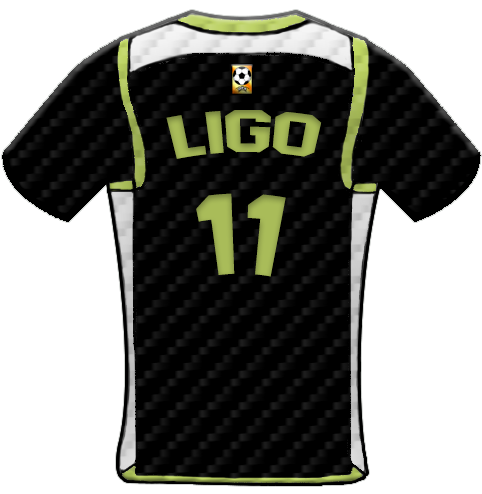
<style>
.page{position:relative;width:482px;height:494px;background:#ffffff}
.page>*{position:absolute;margin:0}
.t1{font:59.4px "AdidasHalfBlock2016";color:#a9bc59;scale:1.13 1}
.t2{font:113.8px "AdidasHalfBlock2016";color:#a9bc59}
</style>
<div class="page">
<p class="t1" style="left:166px;top:110px;width:156px;height:49px">Ligo</p>
<p class="t2" style="left:196px;top:193px;width:90px;height:84px">11</p>
</div>
